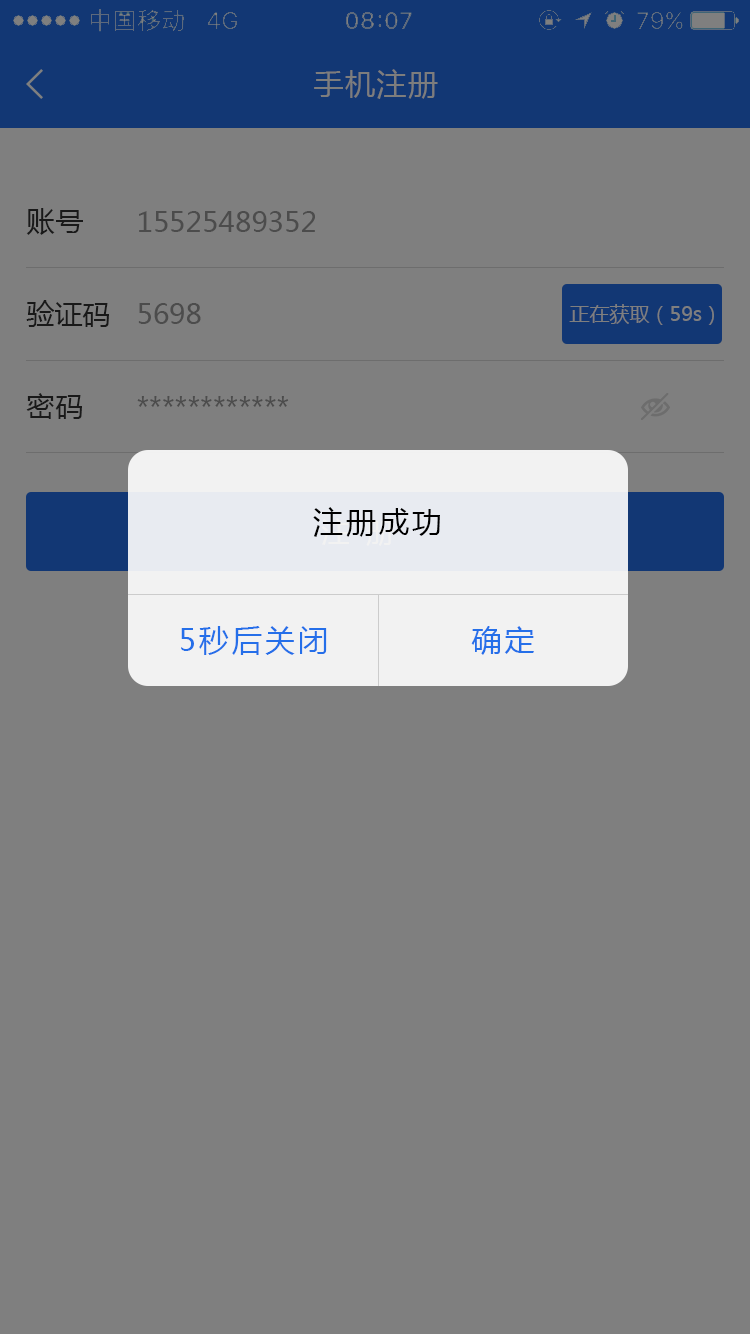
<style>
.page{position:relative;width:750px;height:1334px;background:#7f7f7f}
.page>*{position:absolute;margin:0}
.t1{font:30px "MicrosoftYaHei";letter-spacing:0.05em;color:#7d7d7d}
.t2{font:28px "MicrosoftYaHei";letter-spacing:0.05em;color:#191919}
.t3{font:28px "MicrosoftYaHei";color:#4c4c4c}
.t4{font:28px "MicrosoftYaHei";color:#191919}
.t5{font:20px "MicrosoftYaHei";color:#7f7f7f}
.t6{font:30px "MicrosoftYaHei";letter-spacing:0.1em;color:#000000}
.t7{font:30px "MicrosoftYaHei";letter-spacing:0.1em;color:#256fe9}
</style>
<div class="page">
<p class="t1" style="left:314px;top:69px;width:124px;height:30px">手机注册</p>
<p class="t2" style="left:26px;top:208px;width:57px;height:27px">账号</p>
<p class="t3" style="left:139px;top:211px;width:176px;height:21px">15525489352</p>
<p class="t4" style="left:26px;top:300px;width:83px;height:27px">验证码</p>
<p class="t3" style="left:138px;top:303px;width:63px;height:21px">5698</p>
<p class="t5" style="left:569px;top:304px;width:145px;height:21px">正在获取（59s）</p>
<p class="t2" style="left:26px;top:393px;width:56px;height:26px">密码</p>
<p class="t3" style="left:137px;top:396px;width:152px;height:11px">************</p>
<p class="t6" style="left:313px;top:507px;width:127px;height:30px">注册成功</p>
<p class="t7" style="left:181px;top:626px;width:146px;height:29px">5秒后关闭</p>
<p class="t7" style="left:471px;top:626px;width:63px;height:29px">确定</p>
</div>
